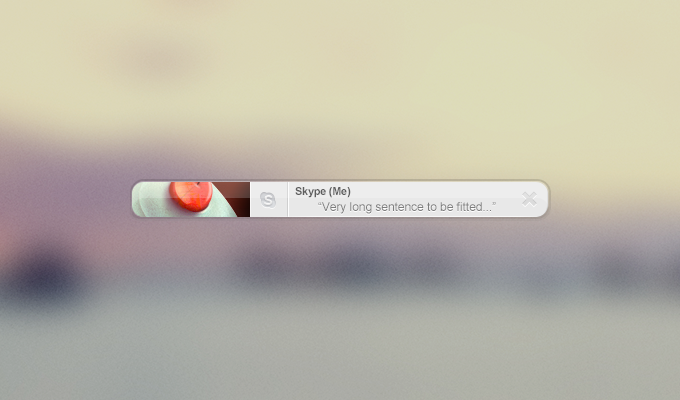
<style>
.page{position:relative;width:680px;height:400px}
.page>*{position:absolute;margin:0}
.t1{font:11px "Arial-BoldMT";letter-spacing:-0.025em;color:#5d5d5d}
.t2{font:12px "ArialMT";color:#7d7d7d}
.t3{font:12px "ArialMT";color:#a8a8a8}
</style>
<div class="page">
<p class="t1" style="left:295px;top:187px;width:56px;height:11px">Skype (Me)</p>
<p class="t2" style="left:318px;top:202px;width:178px;height:12px"><span class="t3"> </span> “Very long sentence to be fitted...”</p>
</div>
